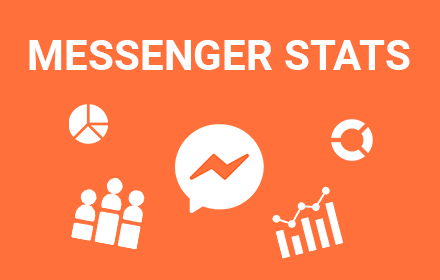
<style>
.page{position:relative;width:440px;height:280px;background:#ff703a}
.page>*{position:absolute;margin:0}
.t1{font:42.3px "Roboto-Bold";color:#ffffff}
</style>
<div class="page">
<p class="t1" style="left:29px;top:40px;width:381px;height:30px">MESSENGER STATS</p>
</div>
